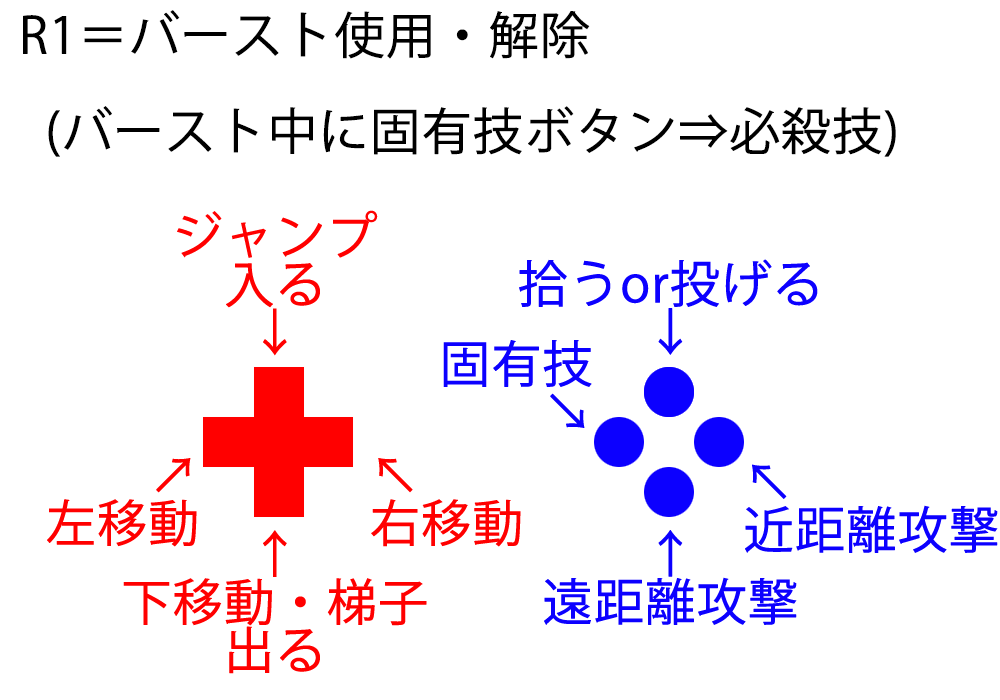
<style>
.page{position:relative;width:1000px;height:700px;background:#ffffff}
.page>*{position:absolute;margin:0}
.t1{font:50px/48px "KozGoPr6N-Regular";color:#000000;font-weight:bold}
.t2{font:50px/48px "KozGoPr6N-Regular";color:#ff0000;font-weight:bold}
.t3{font:50px/48px "KozGoPr6N-Regular";color:#0c00ff;font-weight:bold}
</style>
<div class="page">
<p class="t1" style="left:23px;top:10px;width:873px;height:147px">R1＝バースト使用・解除<br><br>(バースト中に固有技ボタン⇒必殺技)</p>
<p class="t2" style="left:177px;top:210px;width:201px;height:146px;text-align:center">ジャンプ<br>入る<br>↓</p>
<p class="t3" style="left:519px;top:259px;width:299px;height:96px;text-align:center">拾うor投げる<br>↓</p>
<p class="t3" style="left:443px;top:340px;width:149px;height:88px;text-align:center">固有技<br>　　↘</p>
<p class="t2" style="left:47px;top:458px;width:150px;height:89px;text-align:center">↗<br>左移動</p>
<p class="t2" style="left:371px;top:458px;width:150px;height:89px;text-align:center">↖　　<br>右移動</p>
<p class="t3" style="left:745px;top:464px;width:253px;height:89px;text-align:center">↖　　　　<br>近距離攻撃</p>
<p class="t2" style="left:123px;top:530px;width:304px;height:144px;text-align:center">↑<br>下移動・梯子<br>出る</p>
<p class="t3" style="left:544px;top:530px;width:253px;height:95px;text-align:center">↑<br>遠距離攻撃</p>
</div>
